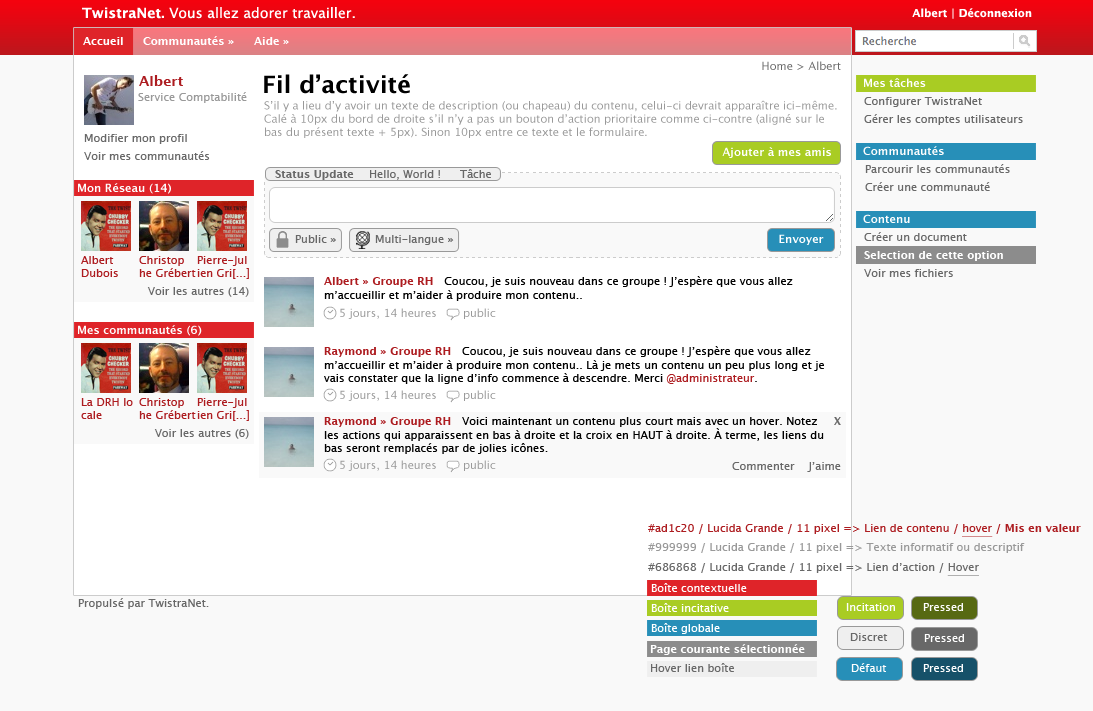
<style>
.page{position:relative;width:1093px;height:711px;background:#f9f9f9}
.page>*{position:absolute;margin:0}
.t1{font:14px "LucidaGrande";color:#ffffff}
.t2{font:14px "LucidaGrande-Bold";color:#ffffff}
.t3{font:11px "LucidaGrande-Bold";color:#ffffff}
.t4{font:11px "LucidaGrande";color:#686868}
.t5{font:14px "LucidaGrande-Bold";color:#ad1c20}
.t6{font:24px "LucidaGrande-Bold";color:#000000}
.t7{font:11px "LucidaGrande-Bold";color:#fdfdfd}
.t8{font:11px "LucidaGrande";color:#999999}
.t9{font:11px/18px "LucidaGrande";color:#686868}
.t10{font:11px "LucidaGrande-Bold";color:#686868}
.t11{font:11px "LucidaGrande";color:#ad1c20}
.t12{font:11px "LucidaGrande";color:#000000}
.t13{font:11px "LucidaGrande-Bold";color:#ad1c20}
.t14{font:11px "LucidaGrande";color:#ad1c20;text-decoration:underline}
.t15{font:11px "LucidaGrande";color:#686868;text-decoration:underline}
.t16{font:11px "LucidaGrande";color:#ffffff}
.t17{font:11px "LucidaGrande";color:#fdfdfd}
.t18{font:11px "LucidaGrande";color:#fefefe}
</style>
<div class="page">
<p class="t1" style="left:82px;top:7px;width:273px;height:12px"><span class="t2">TwistraNet. </span>Vous allez adorer travailler.</p>
<p class="t3" style="left:912px;top:8px;width:120px;height:11px">Albert | Déconnexion</p>
<p class="t3" style="left:83px;top:37px;width:40px;height:8px">Accueil</p>
<p class="t3" style="left:143px;top:36px;width:91px;height:9px">Communautés »</p>
<p class="t3" style="left:254px;top:37px;width:35px;height:8px">Aide »</p>
<p class="t4" style="left:762px;top:61px;width:79px;height:9px">Home &gt; Albert</p>
<p class="t5" style="left:139px;top:75px;width:44px;height:11px">Albert</p>
<p class="t6" style="left:264px;top:74px;width:146px;height:20px">Fil d’activité</p>
<p class="t7" style="left:864px;top:78px;width:62px;height:9px">Mes tâches</p>
<p class="t8" style="left:138px;top:92px;width:109px;height:11px">Service Comptabilité</p>
<p class="t8" style="left:264px;top:100px;width:573px;height:38px">S’il y a lieu d’y avoir un texte de description (ou chapeau) du contenu, celui-ci devrait apparaître ici-même. Calé à 10px du bord de droite s’il n’y a pas un bouton d’action prioritaire comme ci-contre (aligné sur le bas du présent texte + 5px). Sinon 10px entre ce texte et le formulaire.</p>
<p class="t9" style="left:864px;top:97px;width:159px;height:28px">Configurer TwistraNet<br>Gérer les comptes utilisateurs</p>
<p class="t9" style="left:84px;top:134px;width:126px;height:26px">Modifier mon profil<br>Voir mes communautés</p>
<p class="t3" style="left:722px;top:147px;width:109px;height:11px">Ajouter à mes amis</p>
<p class="t7" style="left:863px;top:146px;width:81px;height:9px">Communautés</p>
<p class="t10" style="left:275px;top:170px;width:79px;height:10px">Status Update</p>
<p class="t4" style="left:370px;top:170px;width:70px;height:10px">Hello, World !</p>
<p class="t4" style="left:460px;top:169px;width:31px;height:9px">Tâche</p>
<p class="t9" style="left:865px;top:164px;width:145px;height:27px">Parcourir les communautés<br>Créer une communauté</p>
<p class="t7" style="left:78px;top:183px;width:93px;height:11px">Mon Réseau (14)</p>
<p class="t7" style="left:863px;top:214px;width:47px;height:9px">Contenu</p>
<p class="t4" style="left:295px;top:235px;width:41px;height:8px">Public <span class="t10">»</span></p>
<p class="t4" style="left:375px;top:235px;width:79px;height:10px">Multi-langue <span class="t10">»</span></p>
<p class="t3" style="left:779px;top:234px;width:45px;height:11px">Envoyer</p>
<p class="t11" style="left:81px;top:256px;width:37px;height:21px">Albert<br>Dubois</p>
<p class="t11" style="left:139px;top:256px;width:57px;height:21px">Christop<br>he Grébert</p>
<p class="t11" style="left:197px;top:256px;width:52px;height:23px">Pierre-Jul<br>ien Gri[...]</p>
<p class="t12" style="left:324px;top:276px;width:469px;height:25px"><span class="t13">Albert » Groupe RH   </span>Coucou, je suis nouveau dans ce groupe ! J’espère que vous allez m’accueillir et m’aider à produire mon contenu..</p>
<p class="t4" style="left:147px;top:287px;width:102px;height:10px">Voir les autres (14)</p>
<p class="t8" style="left:340px;top:308px;width:96px;height:11px">5 jours, 14 heures</p>
<p class="t8" style="left:464px;top:308px;width:32px;height:11px">public</p>
<p class="t7" style="left:78px;top:325px;width:124px;height:11px">Mes communautés (6)</p>
<p class="t12" style="left:324px;top:346px;width:500px;height:38px"><span class="t13">Raymond » Groupe RH   </span>Coucou, je suis nouveau dans ce groupe ! J’espère que vous allez m’accueillir et m’aider à produire mon contenu.. Là je mets un contenu un peu plus long et je vais constater que la ligne d’info commence à descendre. Merci <span class="t11">@administrateur</span>.</p>
<p class="t8" style="left:340px;top:390px;width:96px;height:11px">5 jours, 14 heures</p>
<p class="t8" style="left:464px;top:390px;width:32px;height:11px">public</p>
<p class="t11" style="left:81px;top:398px;width:52px;height:21px">La DRH lo<br>cale</p>
<p class="t11" style="left:139px;top:398px;width:57px;height:21px">Christop<br>he Grébert</p>
<p class="t11" style="left:197px;top:398px;width:52px;height:23px">Pierre-Jul<br>ien Gri[...]</p>
<p class="t12" style="left:324px;top:417px;width:500px;height:37px"><span class="t13">Raymond » Groupe RH   </span>Voici maintenant un contenu plus court mais avec un hover. Notez les actions qui apparaissent en bas à droite et la croix en HAUT à droite. À terme, les liens du bas seront remplacés par de jolies icônes.</p>
<p class="t10" style="left:834px;top:417px;width:7px;height:8px">X</p>
<p class="t4" style="left:154px;top:429px;width:95px;height:10px">Voir les autres (6)</p>
<p class="t8" style="left:340px;top:460px;width:96px;height:11px">5 jours, 14 heures</p>
<p class="t8" style="left:464px;top:460px;width:32px;height:11px">public</p>
<p class="t4" style="left:732px;top:462px;width:109px;height:10px">Commenter    J’aime</p>
<p class="t11" style="left:648px;top:524px;width:433px;height:13px">#ad1c20 / Lucida Grande / 11 pixel =&gt; Lien de contenu / <span class="t14">hover</span> / <span class="t13">Mis en valeur</span></p>
<p class="t8" style="left:648px;top:543px;width:377px;height:10px">#999999 / Lucida Grande / 11 pixel =&gt; Texte informatif ou descriptif</p>
<p class="t4" style="left:648px;top:563px;width:331px;height:13px">#686868 / Lucida Grande / 11 pixel =&gt; Lien d’action / <span class="t15">Hover</span></p>
<p class="t16" style="left:651px;top:583px;width:96px;height:9px">Boîte contextuelle</p>
<p class="t4" style="left:78px;top:598px;width:131px;height:11px">Propulsé par TwistraNet.</p>
<p class="t16" style="left:651px;top:603px;width:78px;height:9px">Boîte incitative</p>
<p class="t17" style="left:846px;top:603px;width:49px;height:8px">Incitation</p>
<p class="t17" style="left:923px;top:603px;width:40px;height:8px">Pressed</p>
<p class="t16" style="left:651px;top:623px;width:69px;height:11px">Boîte globale</p>
<p class="t4" style="left:850px;top:633px;width:38px;height:8px">Discret</p>
<p class="t16" style="left:924px;top:634px;width:40px;height:8px">Pressed</p>
<p class="t3" style="left:650px;top:644px;width:155px;height:11px">Page courante sélectionnée</p>
<p class="t4" style="left:651px;top:663px;width:83px;height:9px">Hover lien boîte</p>
<p class="t18" style="left:851px;top:663px;width:36px;height:9px">Défaut</p>
<p class="t18" style="left:923px;top:664px;width:40px;height:8px">Pressed</p>
</div>
